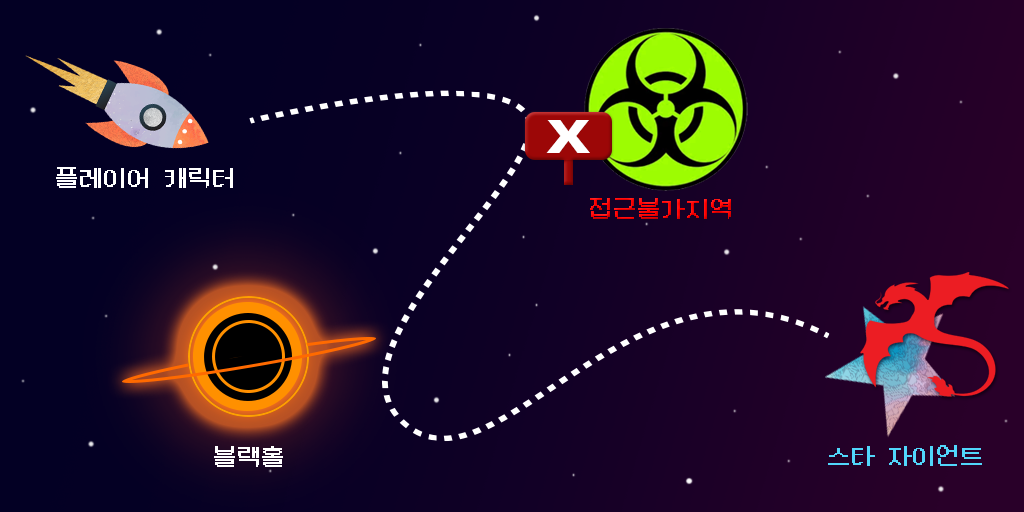
<style>
.page{position:relative;width:1024px;height:512px}
.page>*{position:absolute;margin:0}
.t1{font:41.8px "S-CoreDream-8Heavy";letter-spacing:-0.077em;color:#ffffff;text-transform:uppercase;scale:1.51 1}
.t2{font:25px "DungGeunMo";letter-spacing:-0.033em;color:#ffffff}
.t3{font:25px "DungGeunMo";letter-spacing:-0.033em;color:#ff0000}
.t4{font:25px "DungGeunMo";letter-spacing:-0.033em;color:#51d6fb}
</style>
<div class="page">
<p class="t1" style="left:546px;top:120px;width:44px;height:33px">X</p>
<p class="t2" style="left:56px;top:167px;width:177px;height:21px">플레이어 캐릭터</p>
<p class="t3" style="left:590px;top:198px;width:141px;height:21px">접근불가지역</p>
<p class="t2" style="left:214px;top:446px;width:69px;height:21px">블랙홀</p>
<p class="t4" style="left:828px;top:445px;width:154px;height:21px">스타 자이언트</p>
</div>
